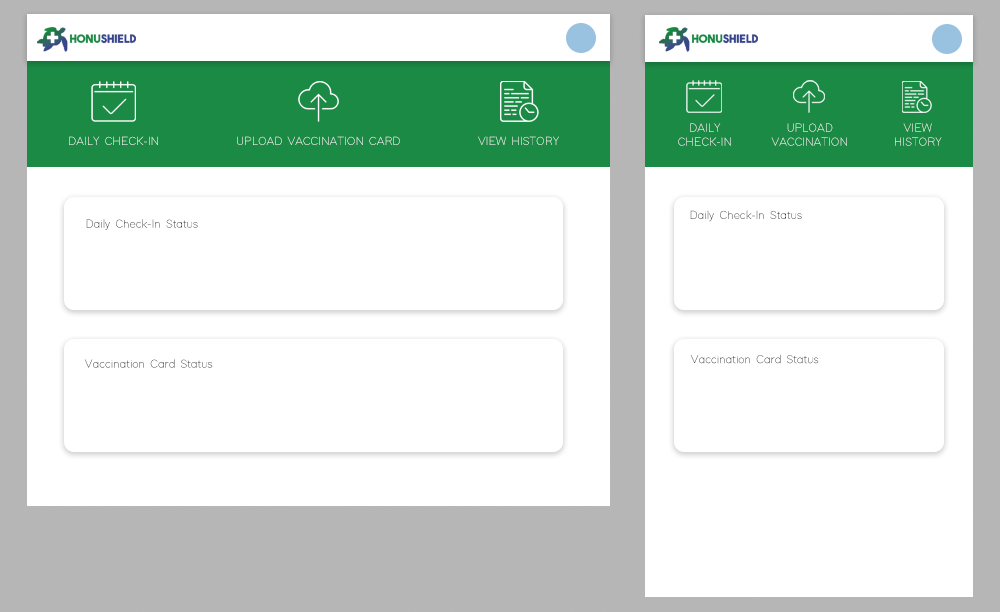
<style>
.page{position:relative;width:1000px;height:612px;background:#ffffff}
.page>*{position:absolute;margin:0}
.t1{font:12px/14px "ModernSansLight"}
.t2{font:12px "ModernSansLight"}
</style>
<div class="page">
<p class="t1" style="left:678px;top:123px;width:53px;height:23px;text-align:center">DAILY<br>CHECK-IN</p>
<p class="t1" style="left:771px;top:123px;width:76px;height:23px;text-align:center">UPLOAD<br>VACCINATION</p>
<p class="t1" style="left:895px;top:123px;width:47px;height:23px;text-align:center">VIEW<br>HISTORY</p>
<p class="t2" style="left:69px;top:136px;width:490px;height:9px">DAILY CHECK-IN               UPLOAD VACCINATION CARD               VIEW HISTORY</p>
<p class="t2" style="left:86px;top:219px;width:112px;height:11px">Daily Check-In Status</p>
<p class="t2" style="left:690px;top:210px;width:112px;height:12px">Daily Check-In Status</p>
<p class="t2" style="left:84px;top:359px;width:129px;height:9px">Vaccination Card Status</p>
<p class="t2" style="left:690px;top:354px;width:129px;height:10px">Vaccination Card Status</p>
</div>
